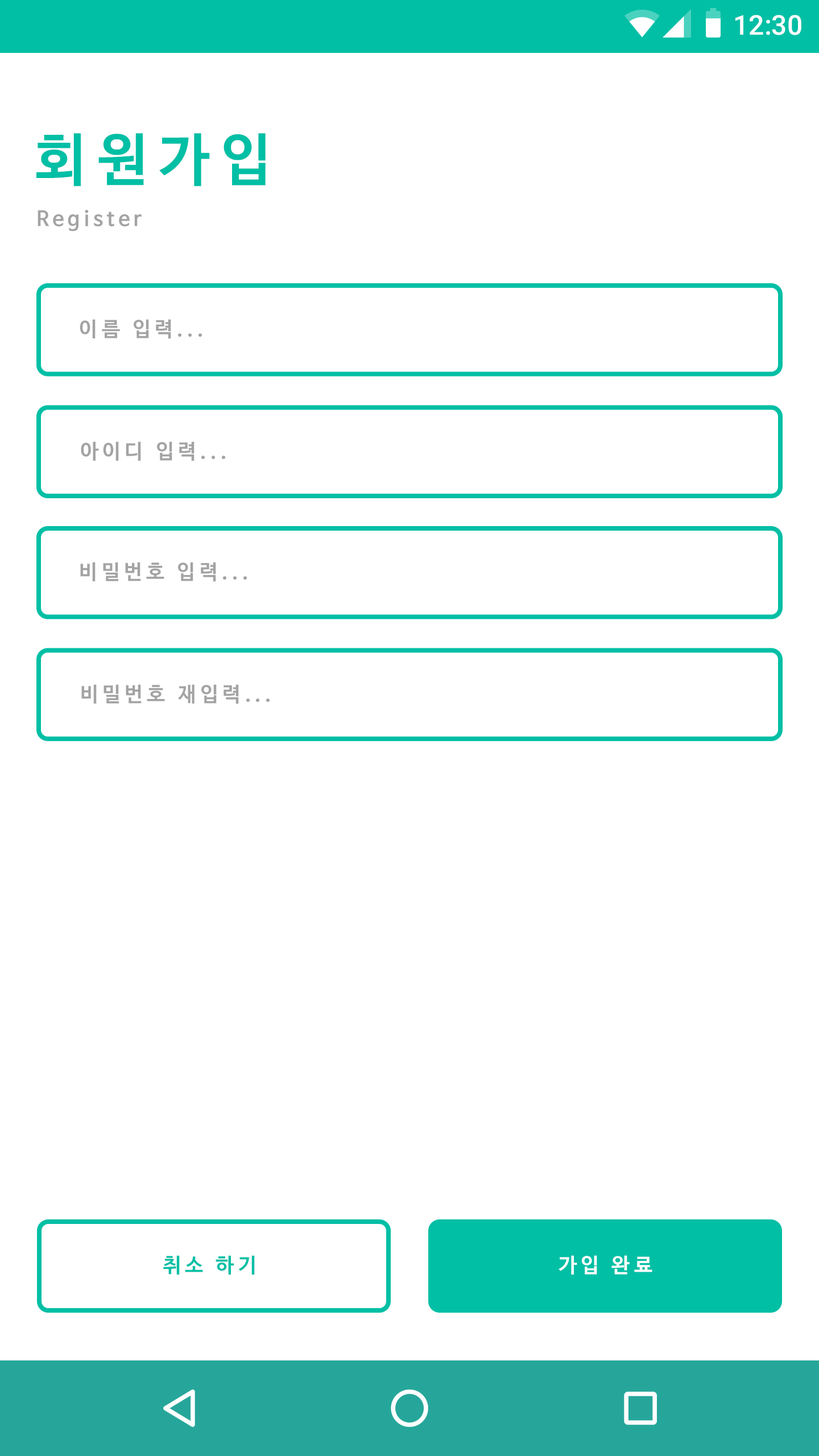
<style>
.page{position:relative;width:819px;height:1456px;background:#ffffff}
.page>*{position:absolute;margin:0}
.t1{font:27.3px "Roboto-Medium";color:#ffffff}
.t2{font:57px "NanumBarunGothicBold";letter-spacing:0.2em;color:#00bfa5}
.t3{font:20.5px "NanumBarunGothicBold";letter-spacing:0.2em;color:#a3a3a3}
.t4{font:20.5px "NanumBarunGothicBold";letter-spacing:0.2em;color:#00bfa5}
.t5{font:20.5px "NanumBarunGothicBold";letter-spacing:0.2em;color:#ffffff}
</style>
<div class="page">
<p class="t1" style="left:735px;top:15px;width:66px;height:20px">12:30</p>
<p class="t2" style="left:36px;top:133px;width:230px;height:54px">회원가입</p>
<p class="t3" style="left:38px;top:210px;width:104px;height:21px">Register</p>
<p class="t3" style="left:80px;top:319px;width:122px;height:20px">이름 입력...</p>
<p class="t3" style="left:81px;top:441px;width:144px;height:20px">아이디 입력...</p>
<p class="t3" style="left:80px;top:562px;width:167px;height:20px">비밀번호 입력...</p>
<p class="t3" style="left:81px;top:684px;width:189px;height:20px">비밀번호 재입력...</p>
<p class="t4" style="left:163px;top:1255px;width:92px;height:20px">취소 하기</p>
<p class="t5" style="left:559px;top:1255px;width:93px;height:20px">가입 완료</p>
</div>
